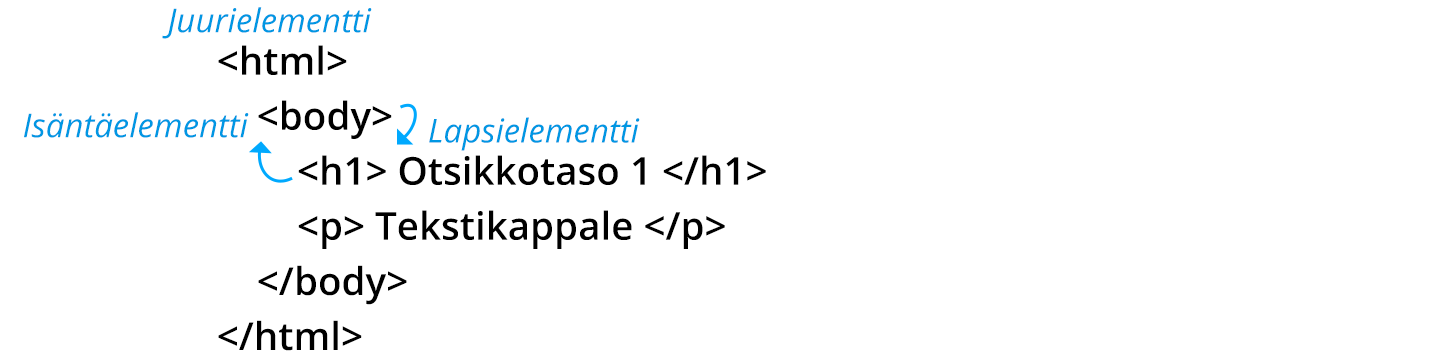
<style>
.page{position:relative;width:1442px;height:354px;background:#ffffff}
.page>*{position:absolute;margin:0}
.t1{font:33px "OpenSans-Italic";color:#0097e3}
.t2{font:38.6px/55.1px "OpenSans-Semibold";color:#000000}
</style>
<div class="page">
<p class="t1" style="left:162px;top:7px;width:210px;height:32px">Juurielementti</p>
<p class="t2" style="left:218px;top:45px;width:548px;height:306px">&lt;html&gt;<br>    &lt;body&gt;<br>        &lt;h1&gt; Otsikkotaso 1 &lt;/h1&gt;<br>        &lt;p&gt; Tekstikappale &lt;/p&gt;<br>    &lt;/body&gt;<br>&lt;/html&gt;</p>
<p class="t1" style="left:24px;top:112px;width:225px;height:26px">Isäntäelementti</p>
<p class="t1" style="left:429px;top:117px;width:211px;height:34px">Lapsielementti</p>
</div>
